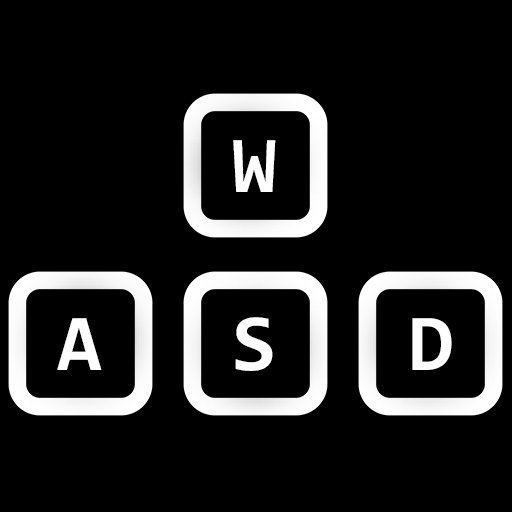
<style>
.page{position:relative;width:512px;height:512px;background:#000000}
.page>*{position:absolute;margin:0}
.t1{font:81.1px "Consolas-Bold";color:#fefefe}
</style>
<div class="page">
<p class="t1" style="left:233px;top:140px;width:43px;height:52px">W</p>
<p class="t1" style="left:57px;top:318px;width:45px;height:52px">A</p>
<p class="t1" style="left:235px;top:317px;width:38px;height:54px">S</p>
<p class="t1" style="left:412px;top:318px;width:40px;height:52px">D</p>
</div>
